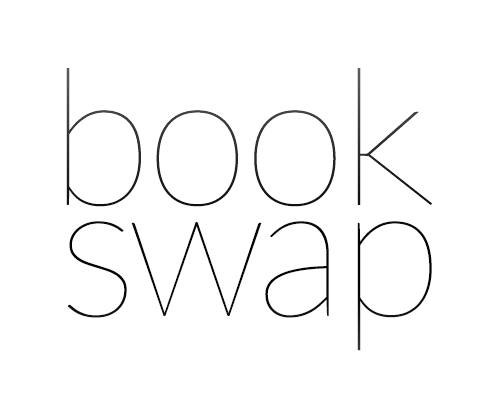
<style>
.page{position:relative;width:490px;height:420px;background:#ffffff}
.page>*{position:absolute;margin:0}
.t1{font:189.9px "Lato-Hairline"}
.t2{font:189.9px "Lato-Hairline";color:#050200}
</style>
<div class="page">
<p class="t1" style="left:66px;top:68px;width:75px;height:139px">b</p>
<p class="t1" style="left:357px;top:68px;width:66px;height:137px">k</p>
<p class="t1" style="left:156px;top:110px;width:82px;height:97px">o</p>
<p class="t1" style="left:254px;top:110px;width:82px;height:97px">o</p>
<p class="t2" style="left:67px;top:221px;width:60px;height:97px">s</p>
<p class="t2" style="left:131px;top:222px;width:131px;height:94px">w</p>
<p class="t2" style="left:265px;top:221px;width:64px;height:97px">a</p>
<p class="t2" style="left:357px;top:221px;width:75px;height:130px">p</p>
</div>
